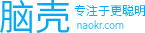
<style>
.page{position:relative;width:145px;height:33px;background:#ffffff}
.page>*{position:absolute;margin:0}
.t1{font:36px "SourceHanSansCN-Normal";color:#03a9f4}
.t2{font:12px "SourceHanSansCN-ExtraLight";letter-spacing:0.01em;color:#03a9f4}
.t3{font:10px "SourceHanSansCN-ExtraLight";letter-spacing:0.01em}
</style>
<div class="page">
<p class="t1" style="left:0px;top:0px;width:70px;height:33px">脑壳</p>
<p class="t2" style="left:74px;top:4px;width:71px;height:13px">专注于更聪明</p>
<p class="t3" style="left:77px;top:20px;width:47px;height:9px">naokr.com</p>
</div>
